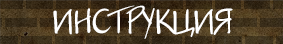
<style>
.page{position:relative;width:283px;height:44px}
.page>*{position:absolute;margin:0}
.t1{font:30px "JakobCTT-Regular";color:#ffffff}
</style>
<div class="page">
<p class="t1" style="left:53px;top:5px;width:180px;height:34px">ИНСТРУКЦИЯ</p>
</div>
